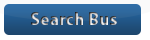
<style>
.page{position:relative;width:150px;height:40px}
.page>*{position:absolute;margin:0}
.t1{font:18px "MyriadPro-Bold"}
</style>
<div class="page">
<p class="t1" style="left:30px;top:12px;width:87px;height:13px">Search Bus</p>
</div>
